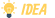
<style>
.page{position:relative;width:55px;height:18px;background:#ffffff}
.page>*{position:absolute;margin:0}
.t1{font:15.8px "Allan-Bold";color:#ffd15b}
</style>
<div class="page">
<p class="t1" style="left:21px;top:3px;width:26px;height:12px">IDEA</p>
</div>
